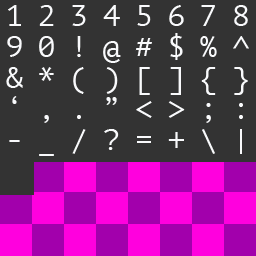
<style>
.page{position:relative;width:256px;height:256px;background:#333333}
.page>*{position:absolute;margin:0}
.t1{font:30px/31px "PTMono-Regular";letter-spacing:0.48em;color:#f9fafc}
</style>
<div class="page">
<p class="t1" style="left:6px;top:5px;width:243px;height:151px">12345678<br>90!@#$%^<br>&amp;*()[]{}<br>‘,.”&lt;&gt;;:<br>-_/?=+\|</p>
</div>
